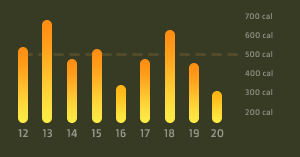
<style>
.page{position:relative;width:300px;height:157px;background:#383b24}
.page>*{position:absolute;margin:0}
.t1{font:8px "DoppioOne-Regular";color:#8b8d80}
.t2{font:11px "DoppioOne-Regular";color:#96978b}
</style>
<div class="page">
<p class="t1" style="left:245px;top:12px;width:28px;height:104px">700 cal<br><br>600 cal<br><br>500 cal<br><br>400 cal<br><br>300 cal<br><br>200 cal</p>
<p class="t2" style="left:18px;top:129px;width:206px;height:9px">12     13     14     15     16     17     18     19    20</p>
</div>
